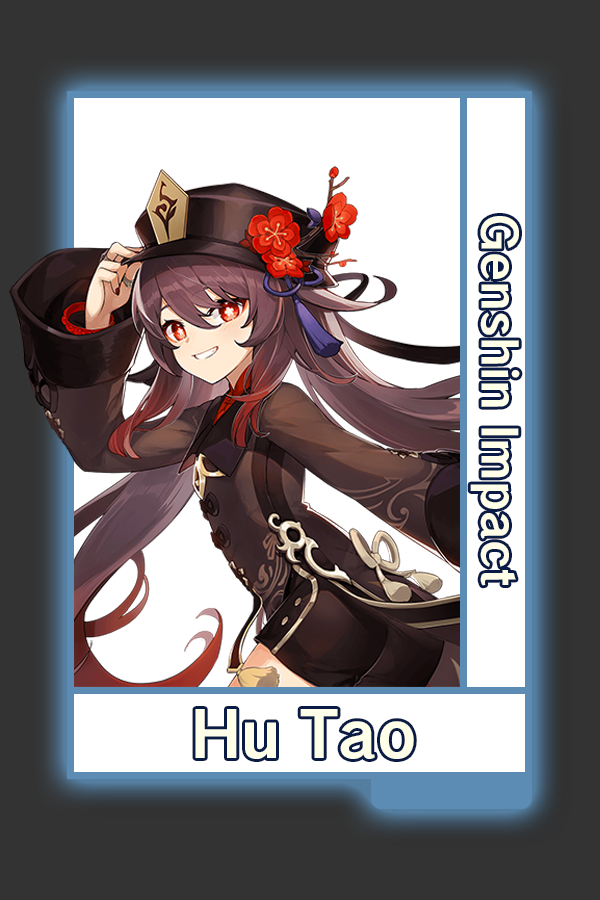
<style>
.page{position:relative;width:600px;height:900px;background:#ffffff}
.page>*{position:absolute;margin:0}
.t1{font:48.8px "HYWenHei-HEW";color:#fefef4}
.t2{font:65.2px "HYWenHei-HEW";color:#fefef4}
</style>
<div class="page">
<p class="t1" style="left:470px;top:216px;width:50px;height:370px;rotate:90deg">Genshin Impact</p>
<p class="t2" style="left:195px;top:709px;width:219px;height:50px">Hu Tao</p>
</div>
